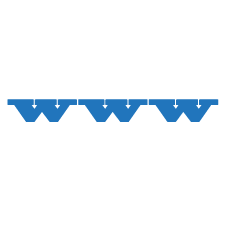
<style>
.page{position:relative;width:225px;height:225px;background:#ffffff}
.page>*{position:absolute;margin:0}
.t1{font:30px "BlackoakStd";letter-spacing:0.01em;color:#2175bc}
</style>
<div class="page">
<p class="t1" style="left:7px;top:99px;width:212px;height:23px">WWW</p>
</div>
